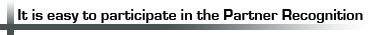
<style>
.page{position:relative;width:372px;height:35px;background:#ffffff}
.page>*{position:absolute;margin:0}
.t1{font:16px "EurostileBold";color:#000000}
</style>
<div class="page">
<p class="t1" style="left:18px;top:9px;width:345px;height:14px">It is easy to participate in the Partner Recognition</p>
</div>
